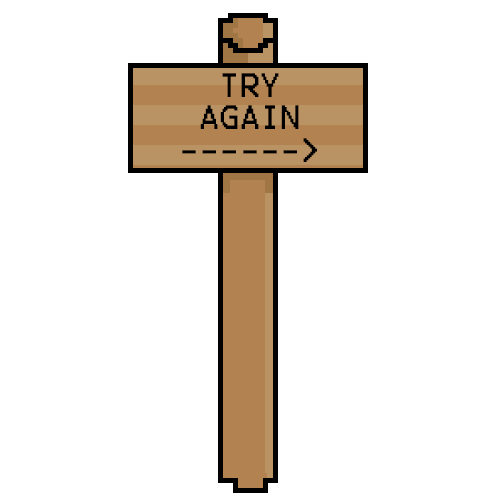
<style>
.page{position:relative;width:500px;height:500px;background:#ffffff}
.page>*{position:absolute;margin:0}
.t1{font:27px "Terminal";color:#000000}
</style>
<div class="page">
<p class="t1" style="left:182px;top:73px;width:135px;height:89px;text-align:center">TRY<br>AGAIN<br>------&gt;</p>
</div>
